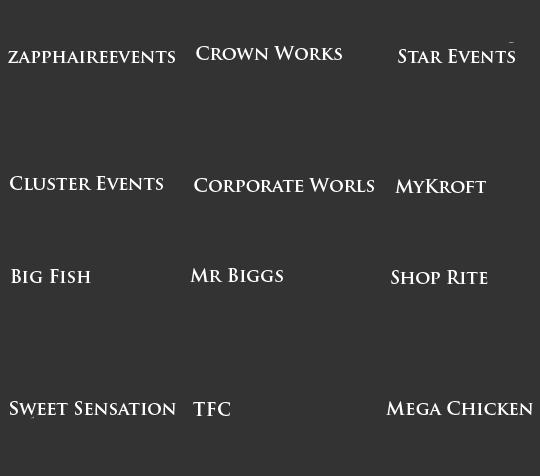
<style>
.page{position:relative;width:540px;height:476px;background:#333333}
.page>*{position:absolute;margin:0}
.t1{font:18px "TrajanPro-Bold";color:#ffffff}
</style>
<div class="page">
<p class="t1" style="left:8px;top:51px;width:167px;height:12px">zapphaireevents</p>
<p class="t1" style="left:196px;top:46px;width:146px;height:14px">Crown Works</p>
<p class="t1" style="left:398px;top:49px;width:117px;height:14px">Star Events</p>
<p class="t1" style="left:10px;top:176px;width:153px;height:14px">Cluster Events</p>
<p class="t1" style="left:194px;top:178px;width:180px;height:14px">Corporate Worls</p>
<p class="t1" style="left:395px;top:179px;width:91px;height:14px">MyKroft</p>
<p class="t1" style="left:11px;top:269px;width:80px;height:14px">Big Fish</p>
<p class="t1" style="left:190px;top:268px;width:93px;height:14px">Mr Biggs</p>
<p class="t1" style="left:391px;top:270px;width:97px;height:14px">Shop Rite</p>
<p class="t1" style="left:10px;top:401px;width:166px;height:14px">Sweet Sensation</p>
<p class="t1" style="left:386px;top:401px;width:147px;height:14px">Mega Chicken</p>
<p class="t1" style="left:193px;top:402px;width:37px;height:14px">TFC</p>
</div>
